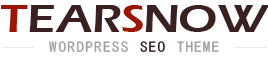
<style>
.page{position:relative;width:268px;height:59px;background:#ffffff}
.page>*{position:absolute;margin:0}
.t1{font:40px "ErasITC-Demi";letter-spacing:0.06em;color:#3a2020;scale:1.17 1}
.t2{font:40px "ErasITC-Demi";letter-spacing:0.06em;color:#9c1701;scale:1.17 1}
.t3{font:15.3px "SimHei";letter-spacing:0.16em;color:#a1a1a1}
.t4{font:15.3px "SimHei";letter-spacing:0.16em;color:#3a2020}
</style>
<div class="page">
<p class="t1" style="left:0px;top:5px;width:270px;height:27px"><span class="t2">T</span>EAR<span class="t2">S</span>NOW</p>
<p class="t3" style="left:48px;top:41px;width:171px;height:11px">WORDPRESS <span class="t4">SEO</span> THEME</p>
</div>
